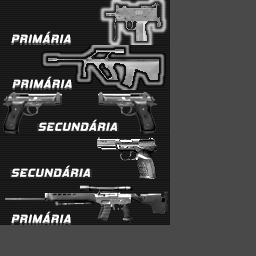
<style>
.page{position:relative;width:256px;height:256px;background:#494949}
.page>*{position:absolute;margin:0}
.t1{font:11.5px "HemiHeadRg-BoldItalic";letter-spacing:0.08em;color:#ffffff;text-transform:uppercase}
</style>
<div class="page">
<p class="t1" style="left:11px;top:31px;width:60px;height:12px">pRIMÁRIA</p>
<p class="t1" style="left:12px;top:76px;width:60px;height:12px">PRIMÁRIA</p>
<p class="t1" style="left:38px;top:119px;width:79px;height:12px">secundária</p>
<p class="t1" style="left:11px;top:165px;width:79px;height:12px">secundária</p>
<p class="t1" style="left:11px;top:211px;width:60px;height:12px">pRIMÁRIA</p>
</div>
